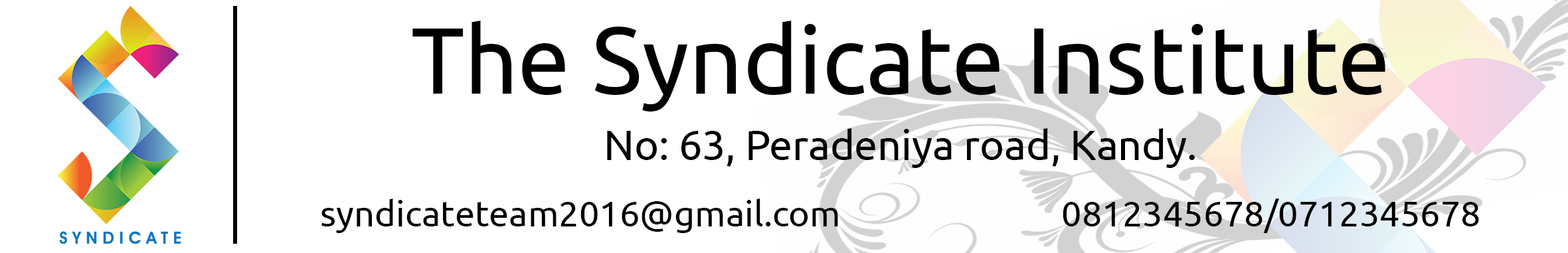
<style>
.page{position:relative;width:1568px;height:253px;background:#ffffff}
.page>*{position:absolute;margin:0}
.t1{font:36px/66.4px "Ubuntu";color:#000000}
.t2{font:94.1px/66.4px "Ubuntu";color:#000000}
.t3{font:41.5px/66.4px "Ubuntu";color:#000000}
</style>
<div class="page">
<p class="t1" style="left:321px;top:21px;width:1158px;height:212px;text-align:center"><span class="t2">The Syndicate Institute<br></span><span class="t3">No: 63, Peradeniya road, Kandy.<br></span>syndicateteam2016@gmail.com          0812345678/0712345678</p>
</div>
